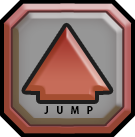
<style>
.page{position:relative;width:135px;height:137px}
.page>*{position:absolute;margin:0}
.t1{font:10px "KozGoPr6N-Bold";letter-spacing:0.74em;color:#000000}
</style>
<div class="page">
<p class="t1" style="left:44px;top:106px;width:49px;height:8px">JUMP</p>
</div>
